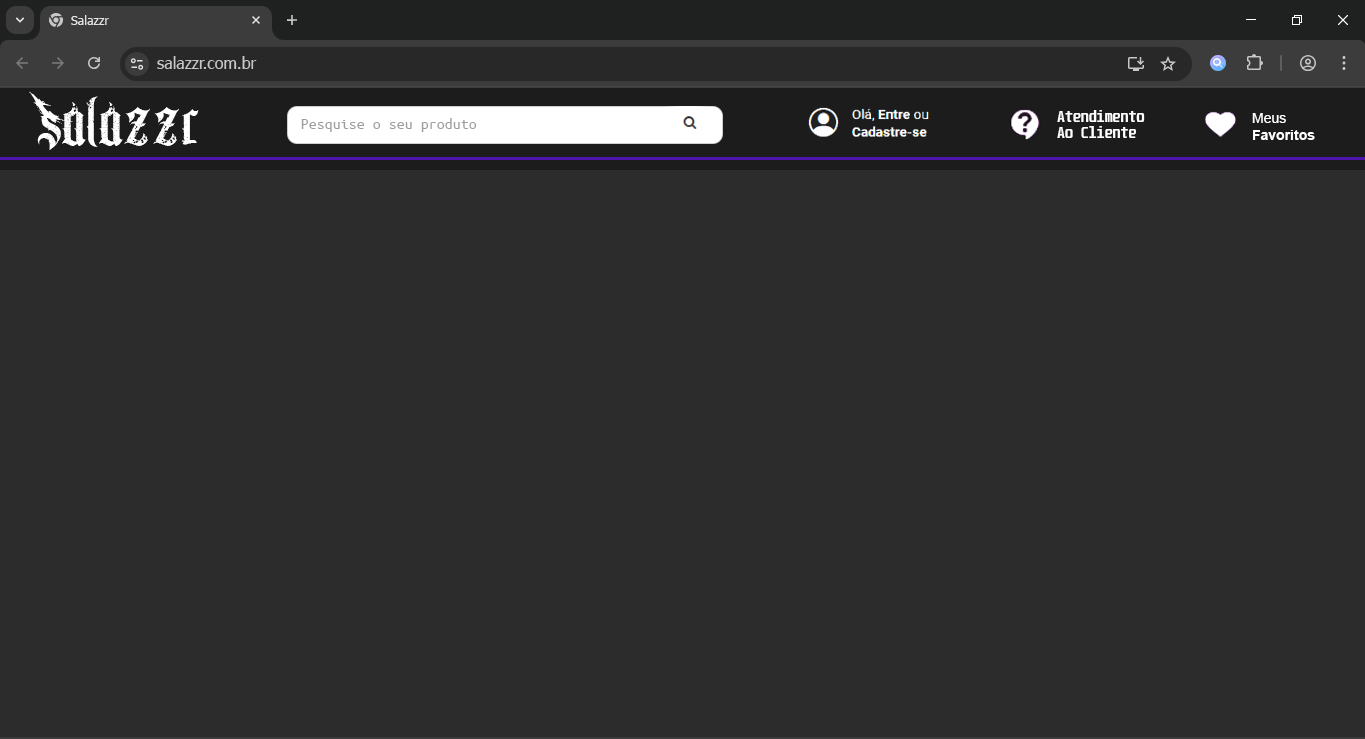
<style>
.page{position:relative;width:1365px;height:739px;background:#2c2c2c}
.page>*{position:absolute;margin:0}
.t1{font:9.4px "Tahoma";color:#e3e3e3}
.t2{font:32.7px "ChaosandPain-CnP";color:#ffffff}
.t3{font:9.9px "Unispace-Bold";color:#ffffff}
.t4{font:10.5px "Arial-BoldMT";color:#ffffff}
.t5{font:10.5px "ArialMT";color:#ffffff}
.t6{font:12px "UbuntuMono-Regular";color:#9d9d9d}
</style>
<div class="page">
<p class="t1" style="left:71px;top:15px;width:38px;height:10px">Salazzr</p>
<p class="t2" style="left:29px;top:91px;width:170px;height:59px">Salazzr</p>
<p class="t3" style="left:1057px;top:110px;width:88px;height:28px">Atendimento<br>Ao Cliente</p>
<p class="t4" style="left:1252px;top:113px;width:63px;height:27px"><span class="t5">Meus<br></span>Favoritos</p>
<p class="t6" style="left:301px;top:118px;width:176px;height:14px">Pesquise o seu produto</p>
</div>
